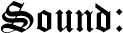
<style>
.page{position:relative;width:123px;height:33px;background:#ffffff}
.page>*{position:absolute;margin:0}
.t1{font:45px "CloisterBlack-Light";color:#000000}
</style>
<div class="page">
<p class="t1" style="left:1px;top:1px;width:122px;height:32px">Sound:</p>
</div>
